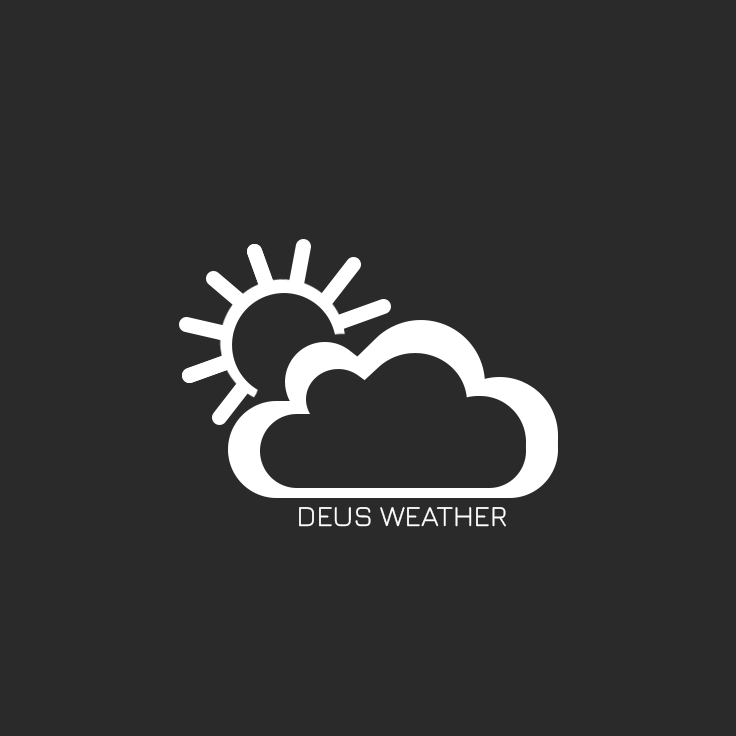
<style>
.page{position:relative;width:736px;height:736px;background:#2a2a2a}
.page>*{position:absolute;margin:0}
.t1{font:29px "Jura-Regular";color:#ffffff}
</style>
<div class="page">
<p class="t1" style="left:299px;top:507px;width:207px;height:20px">DEUS WEATHER</p>
</div>
